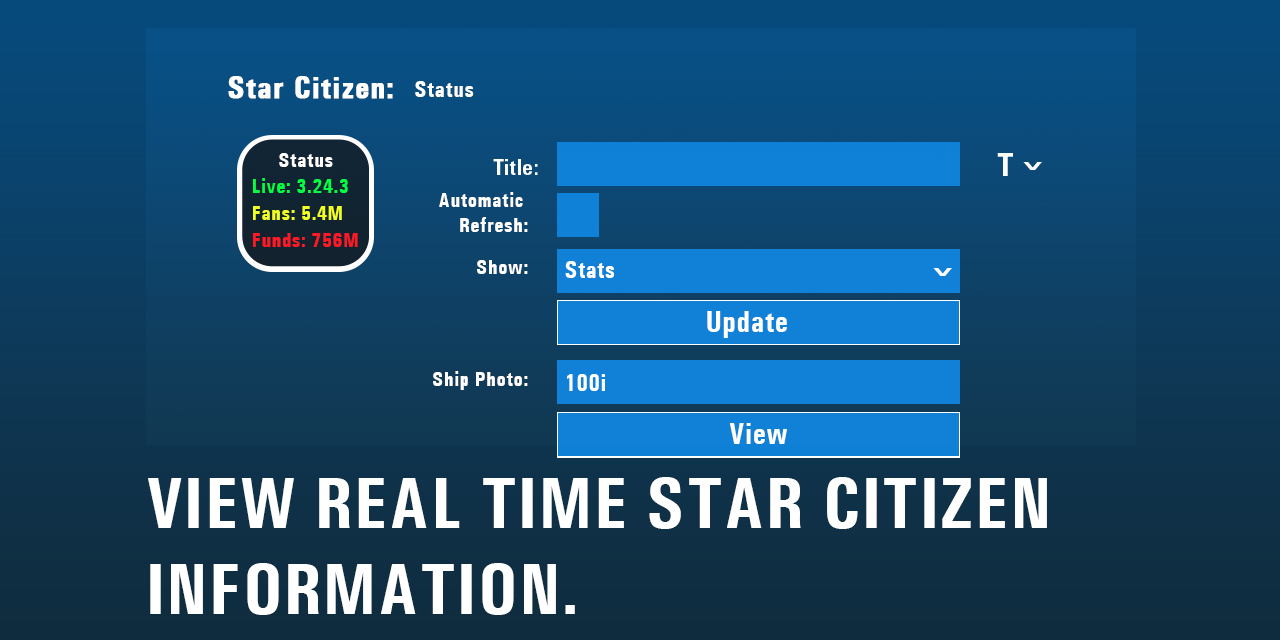
<style>
.page{position:relative;width:1280px;height:640px}
.page>*{position:absolute;margin:0}
.t1{font:31.7px "UniversCondensed-Bold";letter-spacing:0.025em;color:#ffffff;font-weight:bold}
.t2{font:22.9px "UniversCondensed-Bold";letter-spacing:0.025em;color:#ffffff}
.t3{font:21.1px "UniversCondensed-Bold";letter-spacing:0.025em;color:#ffffff}
.t4{font:21.1px "Univers-CondensedBold";letter-spacing:0.025em;color:#ffffff}
.t5{font:31.7px "Univers-CondensedBold";letter-spacing:0.025em;color:#ffffff}
.t6{font:34.1px "Univers-CondensedBold";letter-spacing:0.025em;color:#ffffff;scale:1.88 1}
.t7{font:21.1px "UniversCondensed-Bold";letter-spacing:0.025em;color:#05ff40}
.t8{font:21.1px "UniversCondensed-Bold";letter-spacing:0.025em;color:#f0ff24}
.t9{font:21.1px "UniversCondensed-Bold";letter-spacing:0.025em;color:#ff1925}
.t10{font:24px "UniversCondensed-Bold";letter-spacing:0.025em;color:#ffffff}
.t11{font:30px "UniversCondensed-Bold";letter-spacing:0.025em;color:#ffffff}
.t12{font:72px "UniversCondensed-Bold";letter-spacing:0.025em;color:#ffffff;text-transform:uppercase}
</style>
<div class="page">
<p class="t1" style="left:228px;top:76px;width:165px;height:23px">Star Citizen:</p>
<p class="t2" style="left:415px;top:81px;width:59px;height:16px">Status</p>
<p class="t3" style="left:279px;top:153px;width:54px;height:14px">Status</p>
<p class="t4" style="left:493px;top:159px;width:45px;height:16px">Title:</p>
<p class="t5" style="left:997px;top:153px;width:16px;height:23px">T</p>
<p class="t6" style="left:1023px;top:162px;width:19px;height:8px;rotate:180deg">^</p>
<p class="t7" style="left:253px;top:178px;width:95px;height:15px">Live: 3.24.3</p>
<p class="t3" style="left:439px;top:192px;width:89px;height:40px;text-align:right">Automatic <br>Refresh:</p>
<p class="t8" style="left:253px;top:206px;width:89px;height:14px">Fans: 5.4M</p>
<p class="t9" style="left:253px;top:233px;width:105px;height:14px">Funds: 756M</p>
<p class="t3" style="left:477px;top:260px;width:51px;height:14px">Show:</p>
<p class="t10" style="left:565px;top:261px;width:49px;height:17px">Stats</p>
<p class="t6" style="left:933px;top:268px;width:19px;height:8px;rotate:180deg">^</p>
<p class="t11" style="left:707px;top:311px;width:80px;height:27px">Update</p>
<p class="t3" style="left:433px;top:371px;width:95px;height:19px">Ship Photo:</p>
<p class="t10" style="left:567px;top:374px;width:38px;height:17px">100i</p>
<p class="t11" style="left:729px;top:424px;width:58px;height:21px">View</p>
<p class="t11" style="left:729px;top:423px;width:58px;height:21px">View</p>
<p class="t12" style="left:148px;top:477px;width:899px;height:138px">VIEW REAL TIME STAR CITIZEN <br>INFORMATION.</p>
</div>
